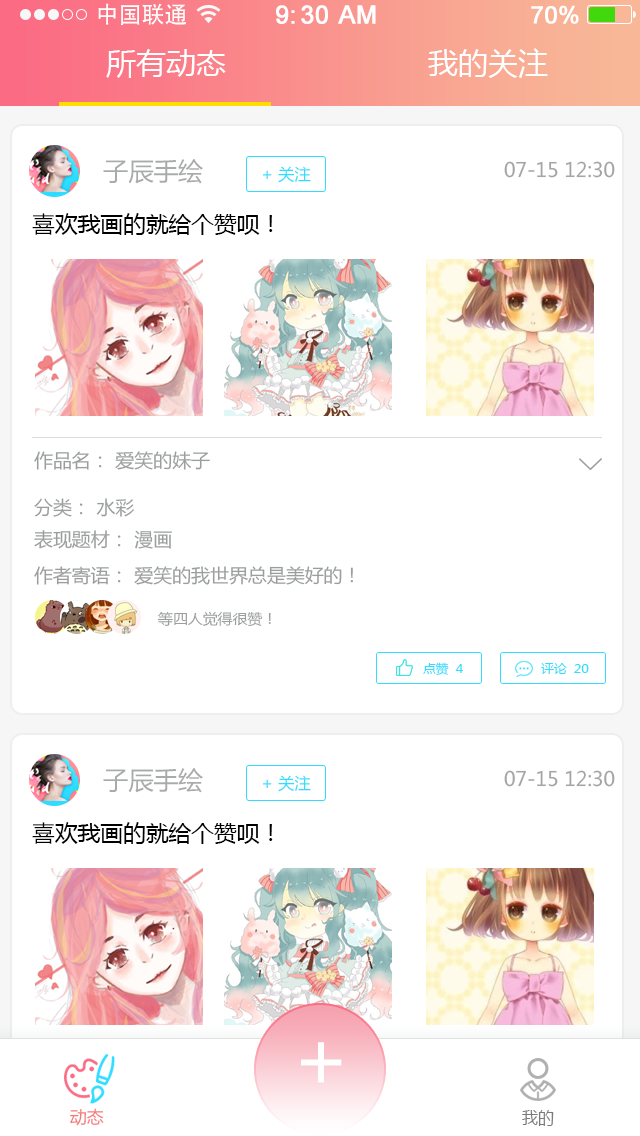
<style>
.page{position:relative;width:640px;height:1136px;background:#ffffff}
.page>*{position:absolute;margin:0}
.t1{font:23px "AdobeHeitiStd-Regular";color:#ffffff}
.t2{font:25px "ArialMT";color:#ffffff;font-weight:bold}
.t3{font:24px "ArialMT";color:#ffffff;font-weight:bold}
.t4{font:30px "MicrosoftYaHei";color:#ffffff}
.t5{font:25.2px "MicrosoftYaHei";color:#a9aaaa}
.t6{font:19.8px "MicrosoftYaHei";color:#a4a5a5}
.t7{font:16.2px "MicrosoftYaHei";color:#31ddff}
.t8{font:22.5px "MicrosoftYaHei";color:#000000}
.t9{font:18.9px "MicrosoftYaHei";color:#9c9e9e}
.t10{font:14.4px "MicrosoftYaHei";color:#9c9e9e;scale:1.03 1}
.t11{font:12.2px "MicrosoftYaHei";color:#32ddff;scale:1.04 1}
.t12{font:80.9px "MicrosoftYaHei";color:#ffffff}
.t13{font:17.1px "MicrosoftYaHei";color:#f47a7a}
.t14{font:17.1px "MicrosoftYaHei";color:#7c7a7a;scale:0.94 1}
</style>
<div class="page">
<p class="t1" style="left:98px;top:3px;width:88px;height:22px">中国联通</p>
<p class="t2" style="left:276px;top:5px;width:100px;height:19px">9:30 AM</p>
<p class="t3" style="left:531px;top:5px;width:48px;height:19px">70%</p>
<p class="t4" style="left:106px;top:49px;width:120px;height:29px">所有动态</p>
<p class="t4" style="left:428px;top:48px;width:120px;height:30px">我的关注</p>
<p class="t5" style="left:103px;top:159px;width:100px;height:25px">子辰手绘</p>
<p class="t6" style="left:504px;top:161px;width:111px;height:17px">07-15 12:30</p>
<p class="t7" style="left:263px;top:166px;width:48px;height:17px">+ 关注</p>
<p class="t8" style="left:32px;top:213px;width:241px;height:22px">喜欢我画的就给个赞呗！</p>
<p class="t9" style="left:34px;top:451px;width:176px;height:19px">作品名： 爱笑的妹子</p>
<p class="t9" style="left:34px;top:498px;width:100px;height:19px">分类： 水彩</p>
<p class="t9" style="left:34px;top:530px;width:138px;height:19px">表现题材： 漫画</p>
<p class="t9" style="left:34px;top:566px;width:319px;height:19px">作者寄语： 爱笑的我世界总是美好的！</p>
<p class="t10" style="left:157px;top:611px;width:114px;height:15px">等四人觉得很赞！</p>
<p class="t11" style="left:423px;top:662px;width:40px;height:13px">点赞  4</p>
<p class="t11" style="left:541px;top:663px;width:48px;height:11px">评论  20</p>
<p class="t5" style="left:103px;top:768px;width:100px;height:25px">子辰手绘</p>
<p class="t6" style="left:504px;top:770px;width:111px;height:17px">07-15 12:30</p>
<p class="t7" style="left:263px;top:775px;width:48px;height:17px">+ 关注</p>
<p class="t8" style="left:32px;top:822px;width:241px;height:22px">喜欢我画的就给个赞呗！</p>
<p class="t12" style="left:301px;top:1042px;width:41px;height:41px">+</p>
<p class="t13" style="left:70px;top:1108px;width:34px;height:18px">动态</p>
<p class="t14" style="left:522px;top:1110px;width:32px;height:16px">我的</p>
</div>
